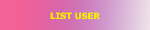
<style>
.page{position:relative;width:150px;height:30px}
.page>*{position:absolute;margin:0}
.t1{font:8.6px "Verdana-Bold";color:#f1e90c}
</style>
<div class="page">
<p class="t1" style="left:50px;top:12px;width:50px;height:8px">LIST USER</p>
</div>
